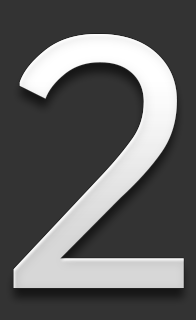
<style>
.page{position:relative;width:196px;height:320px;background:#333333}
.page>*{position:absolute;margin:0}
.t1{font:344.1px "Prelude-Medium";color:#e7e7e7}
</style>
<div class="page">
<p class="t1" style="left:13px;top:34px;width:171px;height:254px">2</p>
<p class="t1" style="left:13px;top:34px;width:171px;height:254px">2</p>
</div>
